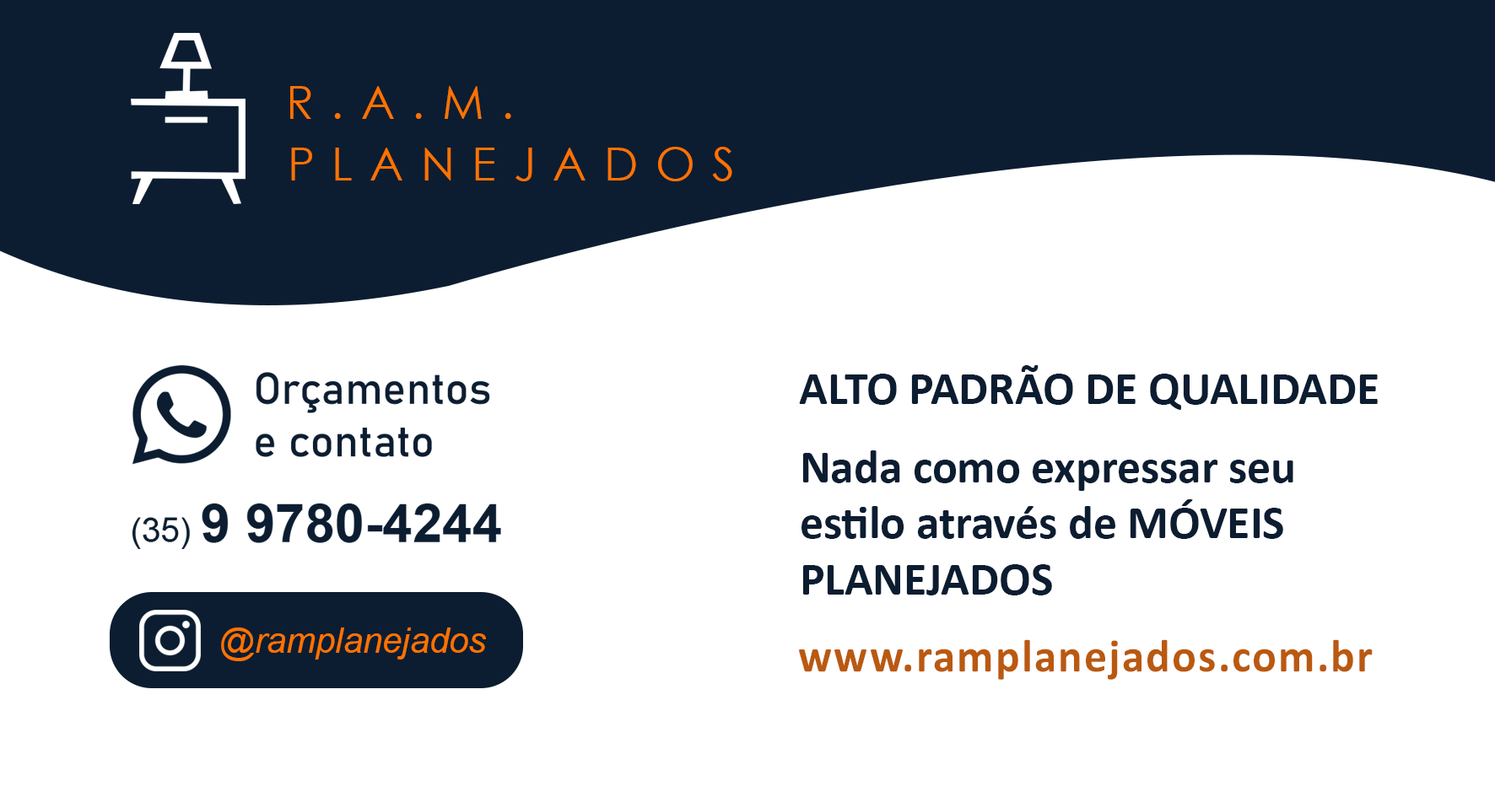
<style>
.page{position:relative;width:1495px;height:797px;background:#ffffff}
.page>*{position:absolute;margin:0}
.t1{font:46.9px "Calibri-Bold";color:#0c1d31}
.t2{font:35.2px "Arial-ItalicMT";color:#ff7200}
.t3{font:46.4px "Calibri-Bold";letter-spacing:0.04em;color:#ba590f}
</style>
<div class="page">
<p class="t1" style="left:799px;top:365px;width:579px;height:45px">ALTO PADRÃO DE QUALIDADE</p>
<p class="t1" style="left:802px;top:451px;width:492px;height:145px">Nada como expressar seu estilo através de MÓVEIS PLANEJADOS</p>
<p class="t2" style="left:221px;top:628px;width:265px;height:34px">@ramplanejados</p>
<p class="t3" style="left:799px;top:640px;width:574px;height:40px">www.ramplanejados.com.br</p>
</div>
